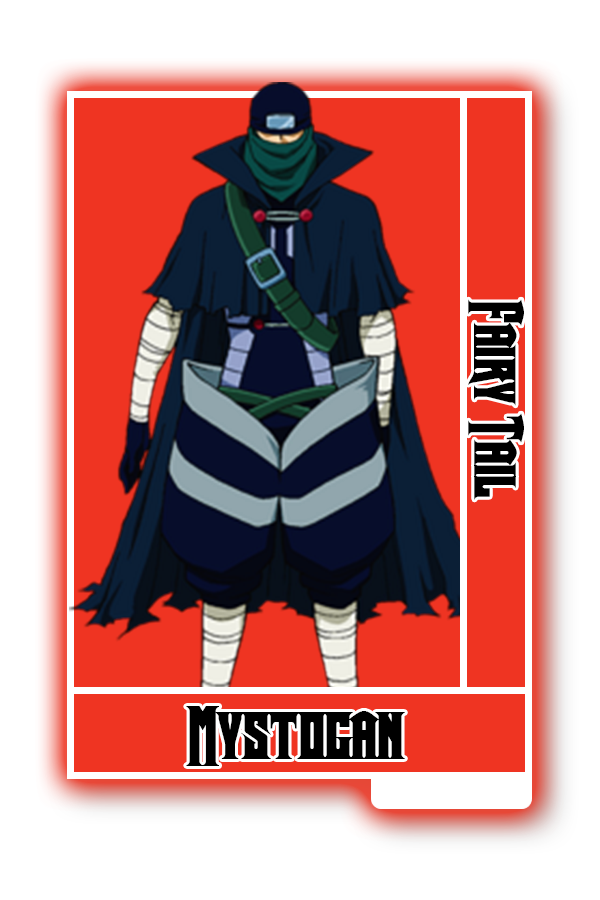
<style>
.page{position:relative;width:600px;height:900px;background:#ffffff}
.page>*{position:absolute;margin:0}
.t1{font:61.5px "Crown-Title";color:#000000}
.t2{font:70.1px "Crown-Title";color:#000000}
</style>
<div class="page">
<p class="t1" style="left:468px;top:299px;width:56px;height:201px;rotate:90deg">Fairy Tail</p>
<p class="t2" style="left:186px;top:706px;width:219px;height:60px">Mystogan</p>
</div>
